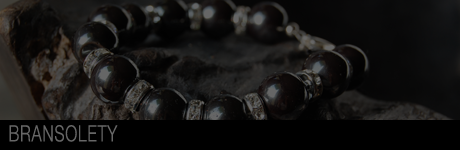
<style>
.page{position:relative;width:460px;height:150px}
.page>*{position:absolute;margin:0}
.t1{font:22.4px "HelveticaNeueCE-Light";letter-spacing:0.05em;color:#666666;scale:0.71 1}
</style>
<div class="page">
<p class="t1" style="left:9px;top:125px;width:109px;height:17px">BRANSOLETY</p>
</div>
